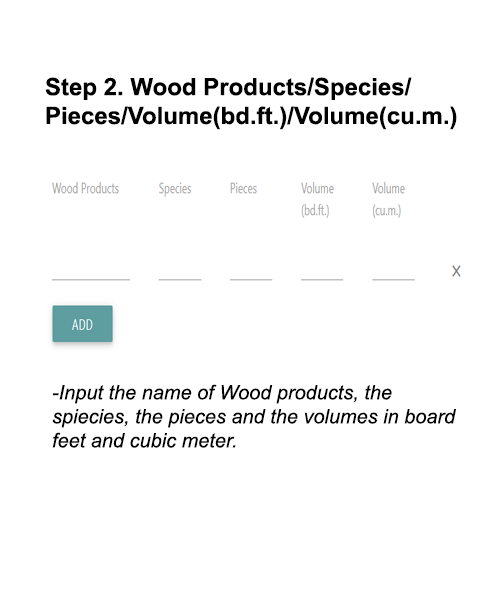
<style>
.page{position:relative;width:500px;height:600px;background:#ffffff}
.page>*{position:absolute;margin:0}
.t1{font:24px "Arial-BoldMT";color:#000000}
.t2{font:20px "Arial-ItalicMT";color:#000000}
</style>
<div class="page">
<p class="t1" style="left:45px;top:77px;width:412px;height:53px">Step 2. Wood Products/Species/<br>Pieces/Volume(bd.ft.)/Volume(cu.m.)</p>
<p class="t2" style="left:52px;top:384px;width:404px;height:64px">-Input the name of Wood products, the spiecies, the pieces and the volumes in board feet and cubic meter.</p>
</div>
